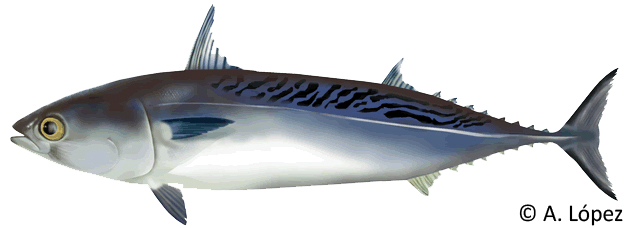
<style>
.page{position:relative;width:627px;height:228px;background:#ffffff}
.page>*{position:absolute;margin:0}
.t1{font:24px "Calibri";color:#000000}
</style>
<div class="page">
<p class="t1" style="left:519px;top:204px;width:104px;height:22px">© A. López</p>
</div>
